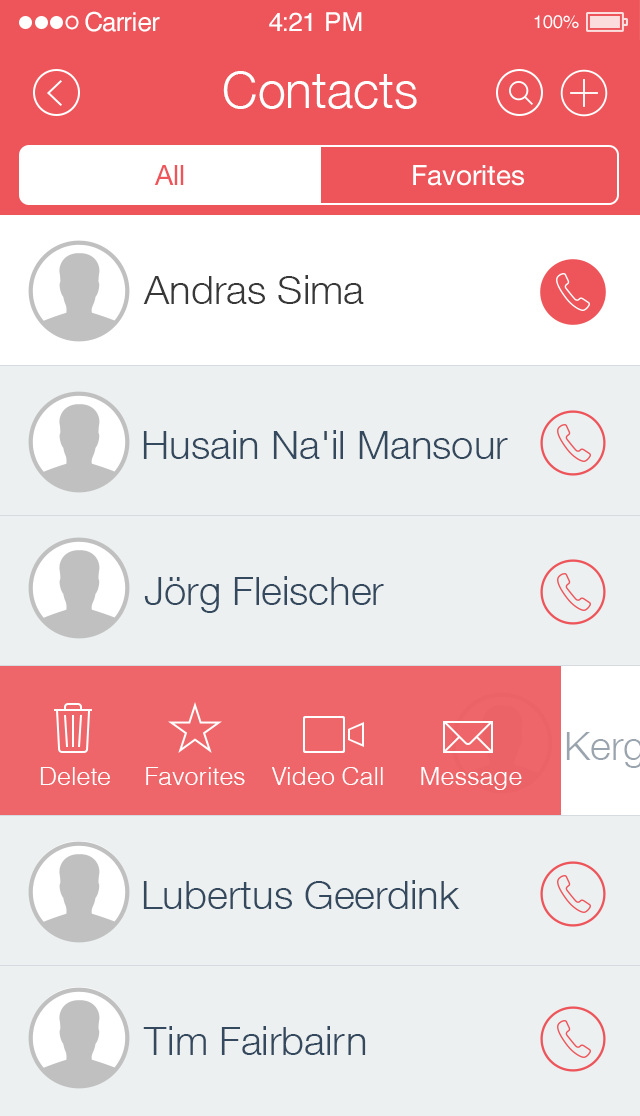
<style>
.page{position:relative;width:640px;height:1116px;background:#ecf0f1}
.page>*{position:absolute;margin:0}
.t1{font:26px "Helvetica";color:#ffffff}
.t2{font:18px "Helvetica";color:#ffffff;text-transform:uppercase}
.t3{font:50px "HelveticaNeue-Light";color:#ffffff}
.t4{font:28px "HelveticaNeue";color:#ed555a}
.t5{font:28px "HelveticaNeue";color:#ffffff}
.t6{font:40px "HelveticaNeueLTCom-Lt";color:#383838}
.t7{font:40px "HelveticaNeueLTCom-Lt";color:#34495e}
.t8{font:25px "Helvetica-Light";color:#ffffff}
</style>
<div class="page">
<p class="t1" style="left:85px;top:11px;width:75px;height:21px">Carrier</p>
<p class="t1" style="left:269px;top:12px;width:93px;height:19px">4:21 PM</p>
<p class="t2" style="left:534px;top:15px;width:45px;height:14px">100%</p>
<p class="t3" style="left:223px;top:71px;width:194px;height:38px">Contacts</p>
<p class="t4" style="left:154px;top:165px;width:30px;height:20px">All</p>
<p class="t5" style="left:413px;top:165px;width:111px;height:21px">Favorites</p>
<p class="t6" style="left:143px;top:275px;width:221px;height:29px">Andras Sima</p>
<p class="t7" style="left:143px;top:430px;width:365px;height:29px">Husain Na'il Mansour</p>
<p class="t7" style="left:144px;top:576px;width:240px;height:37px">Jörg Fleischer</p>
<p class="t8" style="left:40px;top:767px;width:70px;height:18px">Delete</p>
<p class="t8" style="left:146px;top:767px;width:99px;height:18px">Favorites</p>
<p class="t8" style="left:272px;top:767px;width:111px;height:18px">Video Call</p>
<p class="t8" style="left:421px;top:767px;width:101px;height:23px">Message</p>
<p class="t7" style="left:143px;top:880px;width:317px;height:29px">Lubertus Geerdink</p>
<p class="t7" style="left:143px;top:1026px;width:223px;height:29px">Tim Fairbairn</p>
</div>
